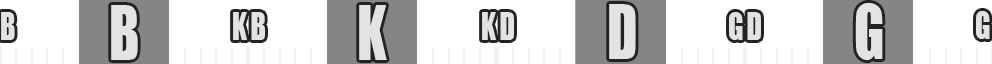
<style>
.page{position:relative;width:992px;height:64px;background:#ffffff}
.page>*{position:absolute;margin:0}
.t1{font:70px "Impact";letter-spacing:0.11em;color:#e3e3e3;scale:0.78 1}
.t2{font:36px "Impact";letter-spacing:0.11em;color:#e3e3e3;scale:0.78 1}
</style>
<div class="page">
<p class="t1" style="left:111px;top:5px;width:27px;height:55px">B</p>
<p class="t1" style="left:359px;top:5px;width:28px;height:55px">K</p>
<p class="t1" style="left:609px;top:4px;width:27px;height:55px">D</p>
<p class="t1" style="left:855px;top:3px;width:28px;height:57px">G</p>
<p class="t2" style="left:1px;top:12px;width:14px;height:28px">B</p>
<p class="t2" style="left:233px;top:12px;width:32px;height:28px">KB</p>
<p class="t2" style="left:482px;top:12px;width:32px;height:28px">KD</p>
<p class="t2" style="left:729px;top:12px;width:32px;height:28px">GD</p>
<p class="t2" style="left:976px;top:11px;width:14px;height:28px">G</p>
</div>
